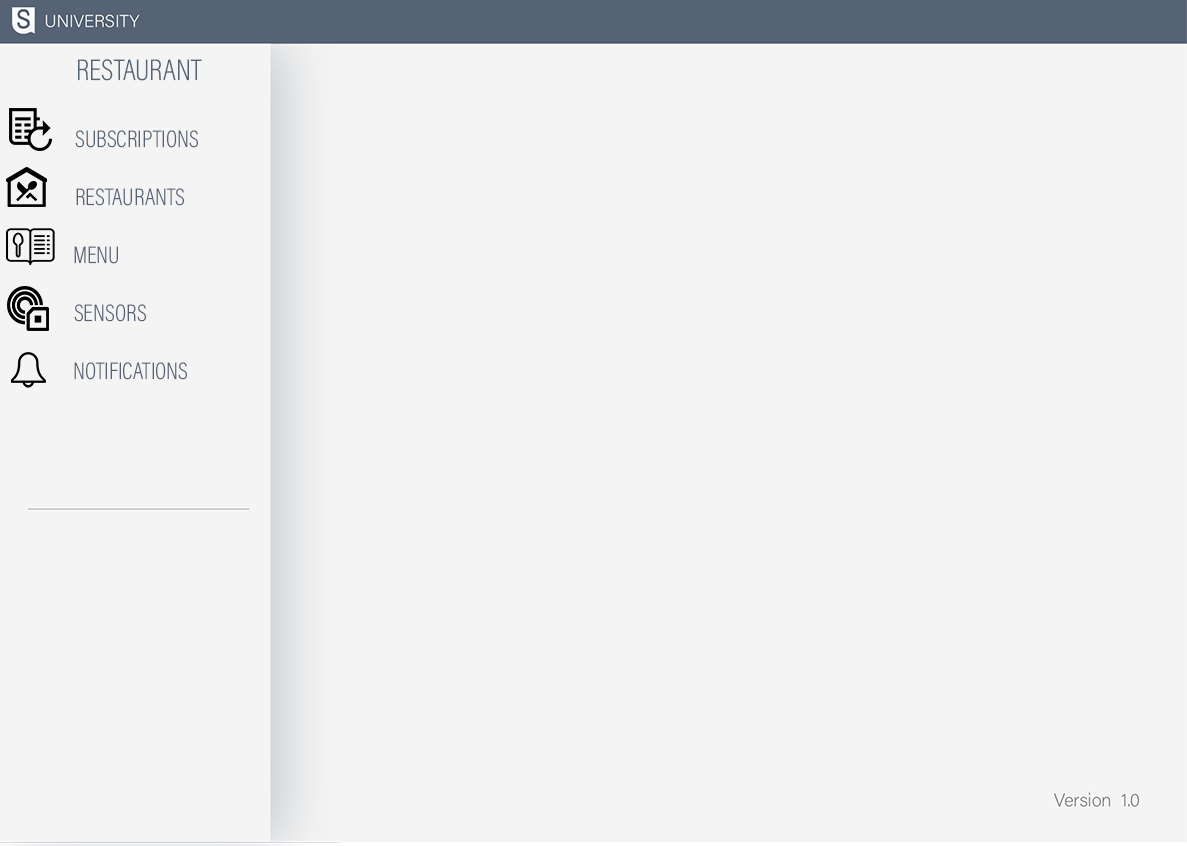
<style>
.page{position:relative;width:1187px;height:846px;background:#f4f4f4}
.page>*{position:absolute;margin:0}
.t1{font:30px "AcuminConcept-CondensedExtraLight";color:#566374}
.t2{font:24px "AcuminConcept-CondensedExtraLight";color:#566374}
</style>
<div class="page">
<p class="t1" style="left:78px;top:59px;width:124px;height:22px">RESTAURANT</p>
<p class="t2" style="left:75px;top:130px;width:123px;height:18px">SUBSCRIPTIONS</p>
<p class="t2" style="left:76px;top:188px;width:108px;height:18px">RESTAURANTS</p>
<p class="t2" style="left:74px;top:246px;width:44px;height:18px">MENU</p>
<p class="t2" style="left:74px;top:304px;width:72px;height:18px">SENSORS</p>
<p class="t2" style="left:74px;top:362px;width:113px;height:18px">NOTIFICATIONS</p>
</div>
